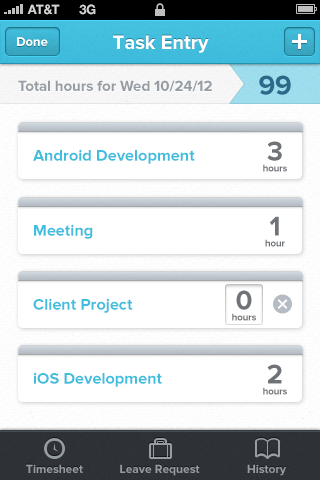
<style>
.page{position:relative;width:320px;height:480px;background:#ffffff}
.page>*{position:absolute;margin:0}
.t1{font:13px "HelveticaNeue-Bold";color:#d4d4d4;text-transform:uppercase}
.t2{font:13px "ProximaNova-Bold";color:#ffffff}
.t3{font:20px "ProximaNova-Bold";color:#ffffff}
.t4{font:28.2px "ProximaNova-Bold";color:#2a6a88;scale:0.97 1}
.t5{font:15px "ProximaNova-Bold";color:#959ca3}
.t6{font:16px "ProximaNova-Bold";color:#41bedd}
.t7{font:28.2px "ProximaNova-Bold";color:#6f7276;scale:0.97 1}
.t8{font:10px "ProximaNova-Bold";color:#6f7276;scale:0.95 1}
.t9{font:12px "ProximaNova-Bold";color:#959ca3}
</style>
<div class="page">
<p class="t1" style="left:27px;top:4px;width:33px;height:11px">AT&amp;t</p>
<p class="t1" style="left:79px;top:4px;width:17px;height:11px">3G</p>
<p class="t2" style="left:17px;top:37px;width:31px;height:9px">Done</p>
<p class="t3" style="left:113px;top:35px;width:96px;height:18px">Task Entry</p>
<p class="t4" style="left:259px;top:75px;width:32px;height:20px">99</p>
<p class="t5" style="left:18px;top:80px;width:194px;height:12px">Total hours for Wed 10/24/12</p>
<p class="t6" style="left:33px;top:149px;width:162px;height:15px">Android Development</p>
<p class="t7" style="left:267px;top:141px;width:15px;height:20px">3</p>
<p class="t8" style="left:263px;top:164px;width:24px;height:8px">hours</p>
<p class="t7" style="left:269px;top:216px;width:10px;height:20px">1</p>
<p class="t6" style="left:34px;top:224px;width:59px;height:15px">Meeting</p>
<p class="t8" style="left:265px;top:239px;width:20px;height:8px">hour</p>
<p class="t7" style="left:236px;top:290px;width:16px;height:20px">0</p>
<p class="t6" style="left:33px;top:298px;width:100px;height:15px">Client Project</p>
<p class="t8" style="left:232px;top:313px;width:24px;height:8px">hours</p>
<p class="t7" style="left:267px;top:364px;width:15px;height:20px">2</p>
<p class="t6" style="left:34px;top:372px;width:128px;height:15px">iOS Development</p>
<p class="t8" style="left:263px;top:387px;width:24px;height:8px">hours</p>
<p class="t9" style="left:26px;top:464px;width:57px;height:9px">Timesheet</p>
<p class="t9" style="left:120px;top:464px;width:80px;height:12px">Leave Request</p>
<p class="t9" style="left:247px;top:464px;width:39px;height:12px">History</p>
</div>
